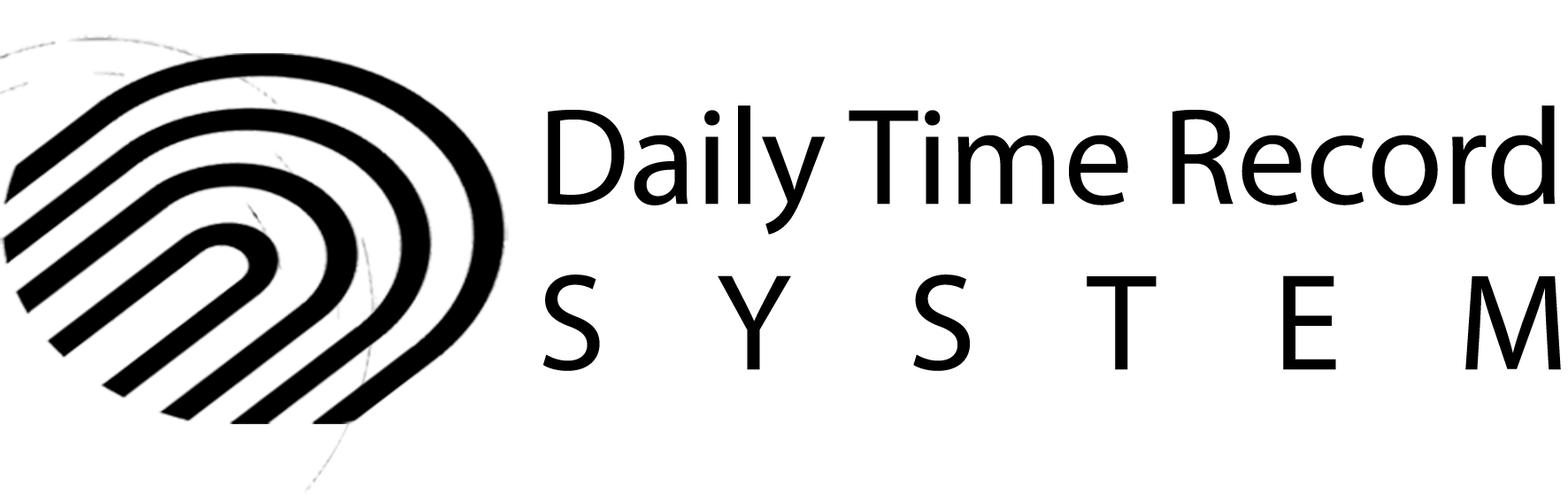
<style>
.page{position:relative;width:1568px;height:495px;background:#ffffff}
.page>*{position:absolute;margin:0}
.t1{font:138px "MyriadPro-Regular";color:#000000}
</style>
<div class="page">
<p class="t1" style="left:543px;top:105px;width:1018px;height:266px">Daily Time Record<br>S    Y    S    T    E    M</p>
</div>
